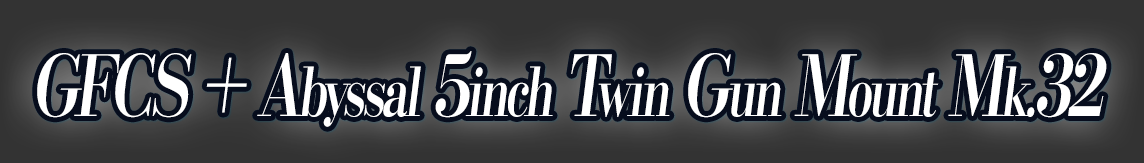
<style>
.page{position:relative;width:1144px;height:163px;background:#333333}
.page>*{position:absolute;margin:0}
.t1{font:84px "KochoStd-Heavy";letter-spacing:-0.08em;color:#ffffff;font-style:italic;scale:0.72 1}
.t2{font:67.2px "KochoStd-Heavy";letter-spacing:-0.08em;color:#ffffff;font-style:italic;scale:0.72 1}
</style>
<div class="page">
<p class="t1" style="left:37px;top:51px;width:1070px;height:76px">GFCS + A<span class="t2">byssal</span> 5<span class="t2">inch</span> T<span class="t2">win</span> G<span class="t2">un</span> M<span class="t2">ount</span> M<span class="t2">k.</span>32</p>
</div>
